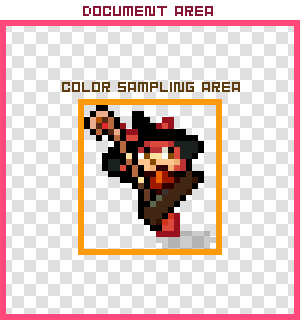
<style>
.page{position:relative;width:300px;height:320px;background:#ffffff}
.page>*{position:absolute;margin:0}
.t1{font:12px "BMbugA6";color:#871635}
.t2{font:12px "BMbugA6";color:#5d3d0f}
</style>
<div class="page">
<p class="t1" style="left:83px;top:6px;width:130px;height:10px">document area</p>
<p class="t2" style="left:62px;top:82px;width:178px;height:10px">color sampling area</p>
</div>
